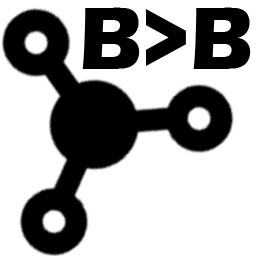
<style>
.page{position:relative;width:256px;height:256px;background:#ffffff}
.page>*{position:absolute;margin:0}
.t1{font:92px "ErasITC-Bold";color:#000000}
</style>
<div class="page">
<p class="t1" style="left:82px;top:7px;width:169px;height:62px">B&gt;B</p>
</div>
